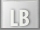
<style>
.page{position:relative;width:40px;height:30px}
.page>*{position:absolute;margin:0}
.t1{font:24px "MyriadPro-BoldCond";color:#fffff8}
</style>
<div class="page">
<p class="t1" style="left:10px;top:9px;width:19px;height:17px;opacity:0.65">LB</p>
</div>
